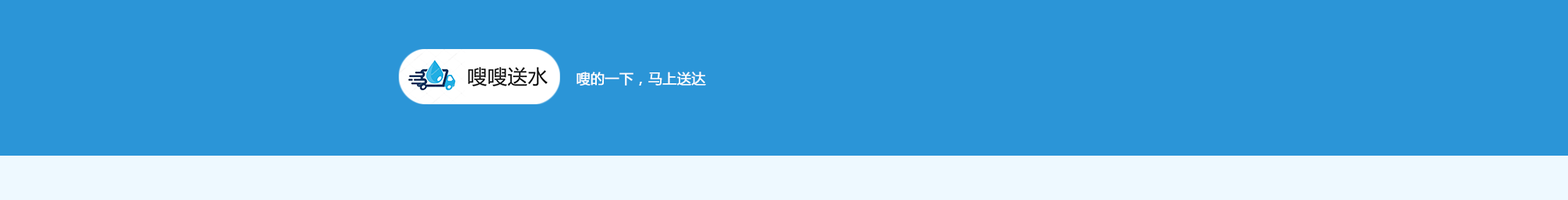
<style>
.page{position:relative;width:1568px;height:200px;background:#2b95d7}
.page>*{position:absolute;margin:0}
.t1{font:14px "MicrosoftYaHei";color:#ffffff;font-weight:bold}
</style>
<div class="page">
<p class="t1" style="left:576px;top:72px;width:130px;height:14px">嗖的一下，马上送达</p>
</div>
